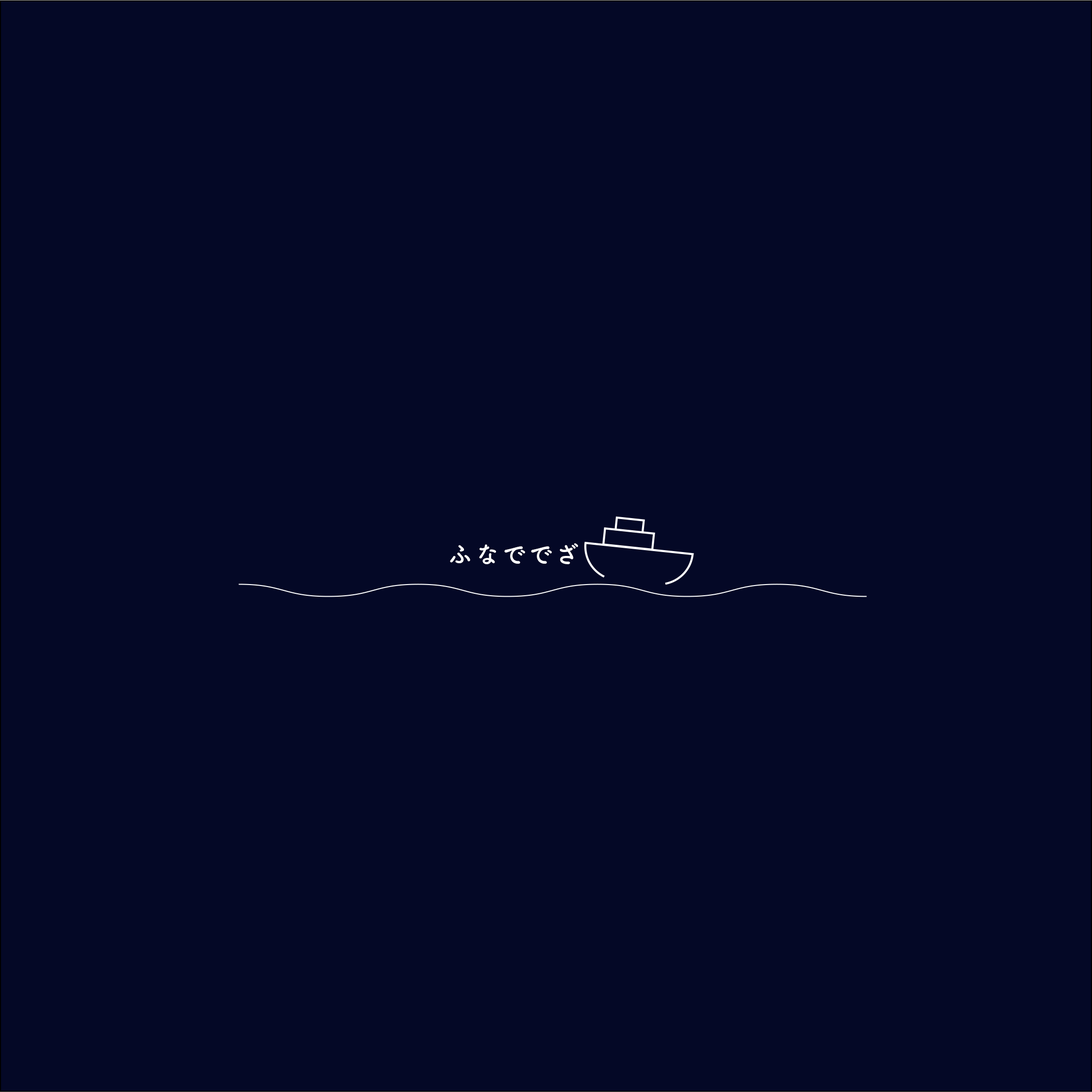
<style>
.page{position:relative;width:1092px;height:1092px;background:#040826}
.page>*{position:absolute;margin:0}
.t1{font:24.3px "TsukuARdGothicStd-B";letter-spacing:0.1em;color:#ffffff}
</style>
<div class="page">
<p class="t1" style="left:450px;top:543px;width:128px;height:21px">ふなででざ</p>
</div>
